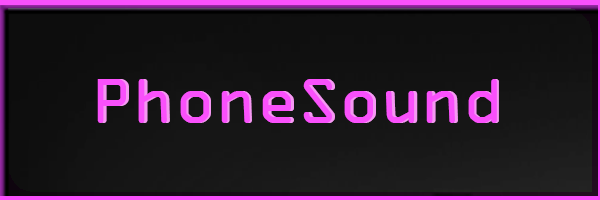
<style>
.page{position:relative;width:600px;height:200px}
.page>*{position:absolute;margin:0}
.t1{font:68.1px "OCRAExtended";color:#f950fb}
.t2{font:68.1px "OCRAExtended"}
</style>
<div class="page">
<p class="t1" style="left:97px;top:79px;width:400px;height:44px">PhoneSound</p>
<p class="t2" style="left:100px;top:79px;width:399px;height:44px">PhoneSound</p>
</div>
